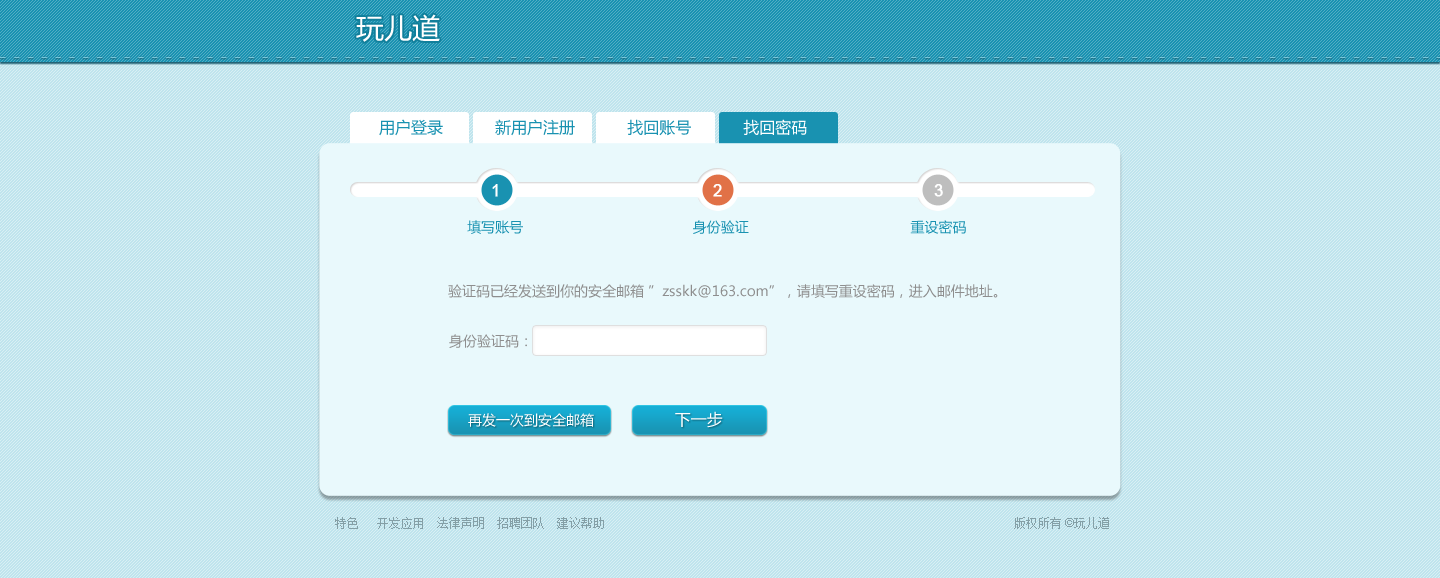
<style>
.page{position:relative;width:1440px;height:578px;background:#bfe4ed}
.page>*{position:absolute;margin:0}
.t1{font:28px "MicrosoftYaHei";color:#ffffff}
.t2{font:16px "MicrosoftYaHei";color:#1992b1}
.t3{font:16px "MicrosoftYaHei";color:#ffffff}
.t4{font:16px "ArialMT";color:#ffffff;font-weight:bold}
.t5{font:14px "MicrosoftYaHei";color:#1992b1}
.t6{font:14px "MicrosoftYaHei";color:#8e8e8e}
.t7{font:14px "MicrosoftYaHei";color:#ffffff}
.t8{font:12px "SimSun";color:#849fa6}
.t9{font:12px "ArialMT";color:#849fa6}
</style>
<div class="page">
<p class="t1" style="left:356px;top:14px;width:84px;height:28px">玩儿道</p>
<p class="t2" style="left:379px;top:119px;width:428px;height:17px">用户登录           新用户注册           找回账号           <span class="t3">找回密码</span></p>
<p class="t4" style="left:492px;top:184px;width:6px;height:13px">1</p>
<p class="t4" style="left:713px;top:184px;width:9px;height:13px">2</p>
<p class="t4" style="left:934px;top:184px;width:9px;height:13px">3</p>
<p class="t5" style="left:467px;top:220px;width:499px;height:14px">填写账号                                         身份验证                                       重设密码</p>
<p class="t6" style="left:448px;top:284px;width:550px;height:14px">验证码已经发送到你的安全邮箱 ”zsskk@163.com”，请填写重设密码，进入邮件地址。</p>
<p class="t6" style="left:449px;top:334px;width:78px;height:14px">身份验证码：</p>
<p class="t7" style="left:468px;top:413px;width:126px;height:14px">再发一次到安全邮箱</p>
<p class="t3" style="left:675px;top:411px;width:48px;height:17px">下一步</p>
<p class="t8" style="left:335px;top:517px;width:269px;height:12px">特色   开发应用  法律声明  招聘团队  建议帮助</p>
<p class="t8" style="left:1014px;top:517px;width:95px;height:12px">版权所有<span class="t9"> ©</span>玩儿道</p>
</div>
